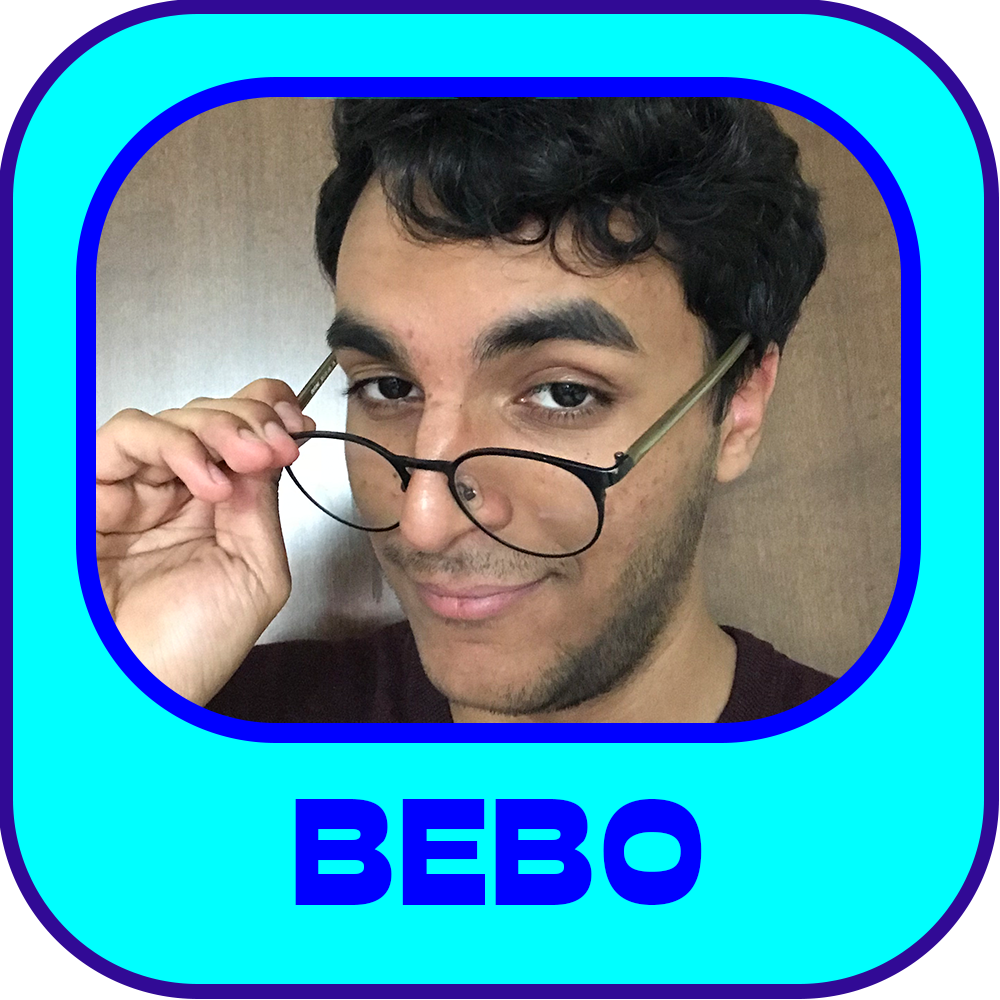
<style>
.page{position:relative;width:1000px;height:1000px;background:#00ffff}
.page>*{position:absolute;margin:0}
.t1{font:145.8px "Glockenspiel";color:#0000ff}
</style>
<div class="page">
<p class="t1" style="left:295px;top:799px;width:407px;height:106px">BEBO</p>
</div>
